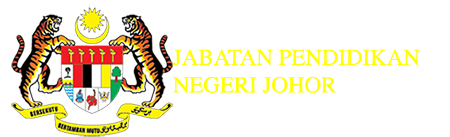
<style>
.page{position:relative;width:450px;height:137px;background:#ffffff}
.page>*{position:absolute;margin:0}
.t1{font:22.9px "Times-Roman";color:#ffff00}
</style>
<div class="page">
<p class="t1" style="left:173px;top:49px;width:247px;height:44px">JABATAN PENDIDIKAN <br>NEGERI JOHOR</p>
</div>
